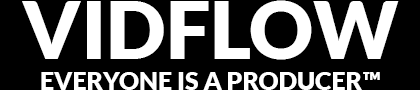
<style>
.page{position:relative;width:420px;height:90px;background:#000000}
.page>*{position:absolute;margin:0}
.t1{font:80px "Lato-Black";color:#ffffff;text-transform:uppercase}
.t2{font:25px "Lato-Black";color:#ffffff;text-transform:uppercase}
</style>
<div class="page">
<p class="t1" style="left:22px;top:0px;width:377px;height:60px">VIDFLOW</p>
<p class="t2" style="left:41px;top:72px;width:339px;height:18px">EVERYONE IS A PRODUCER™</p>
</div>
